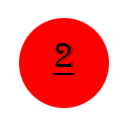
<style>
.page{position:relative;width:128px;height:128px;background:#ffffff}
.page>*{position:absolute;margin:0}
.t1{font:36px "Algerian";color:#000000;text-decoration:underline}
</style>
<div class="page">
<p class="t1" style="left:52px;top:43px;width:23px;height:33px">2</p>
</div>
